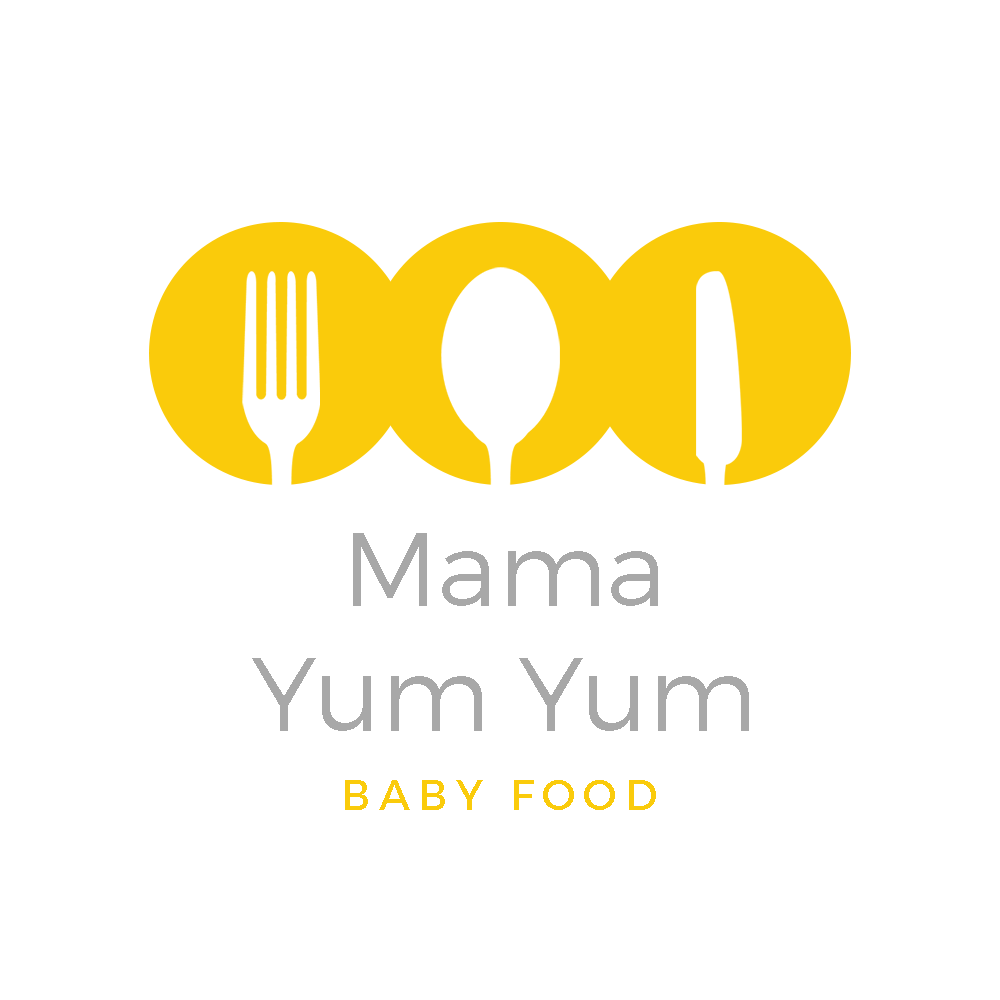
<style>
.page{position:relative;width:1000px;height:1000px;background:#ffffff}
.page>*{position:absolute;margin:0}
.t1{font:104.2px "Montserrat-Light";color:#a8a8a8}
.t2{font:41.7px "Montserrat-Regular";letter-spacing:0.2em;color:#facb0b}
</style>
<div class="page">
<p class="t1" style="left:252px;top:533px;width:497px;height:198px;text-align:center">Mama<br>Yum Yum</p>
<p class="t2" style="left:345px;top:780px;width:311px;height:30px">BABY FOOD</p>
</div>
